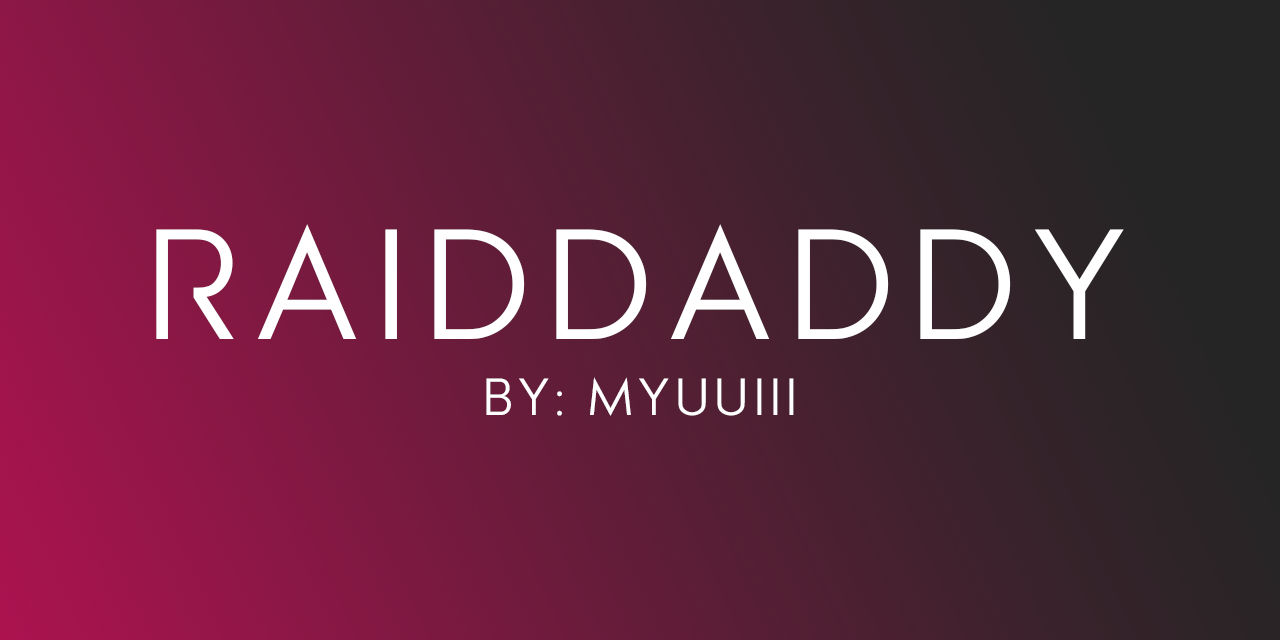
<style>
.page{position:relative;width:1280px;height:640px}
.page>*{position:absolute;margin:0}
.t1{font:150px "Pasajero";letter-spacing:0.15em;color:#ffffff}
.t2{font:50px "Pasajero";letter-spacing:0.15em;color:#ffffff}
</style>
<div class="page">
<p class="t1" style="left:156px;top:224px;width:968px;height:115px">RaidDaddy</p>
<p class="t2" style="left:486px;top:377px;width:308px;height:39px">By: Myuuiii</p>
</div>
